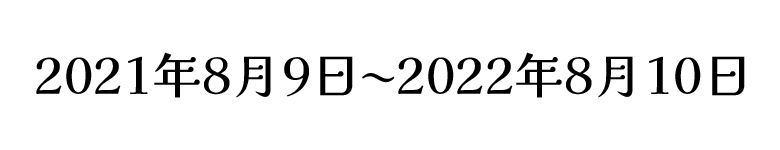
<style>
.page{position:relative;width:780px;height:150px;background:#ffffff}
.page>*{position:absolute;margin:0}
.t1{font:50px "KaiseiHarunoUmi-Medium";color:#000000}
</style>
<div class="page">
<p class="t1" style="left:36px;top:52px;width:709px;height:46px">2021年8月9日〜2022年8月10日</p>
</div>
